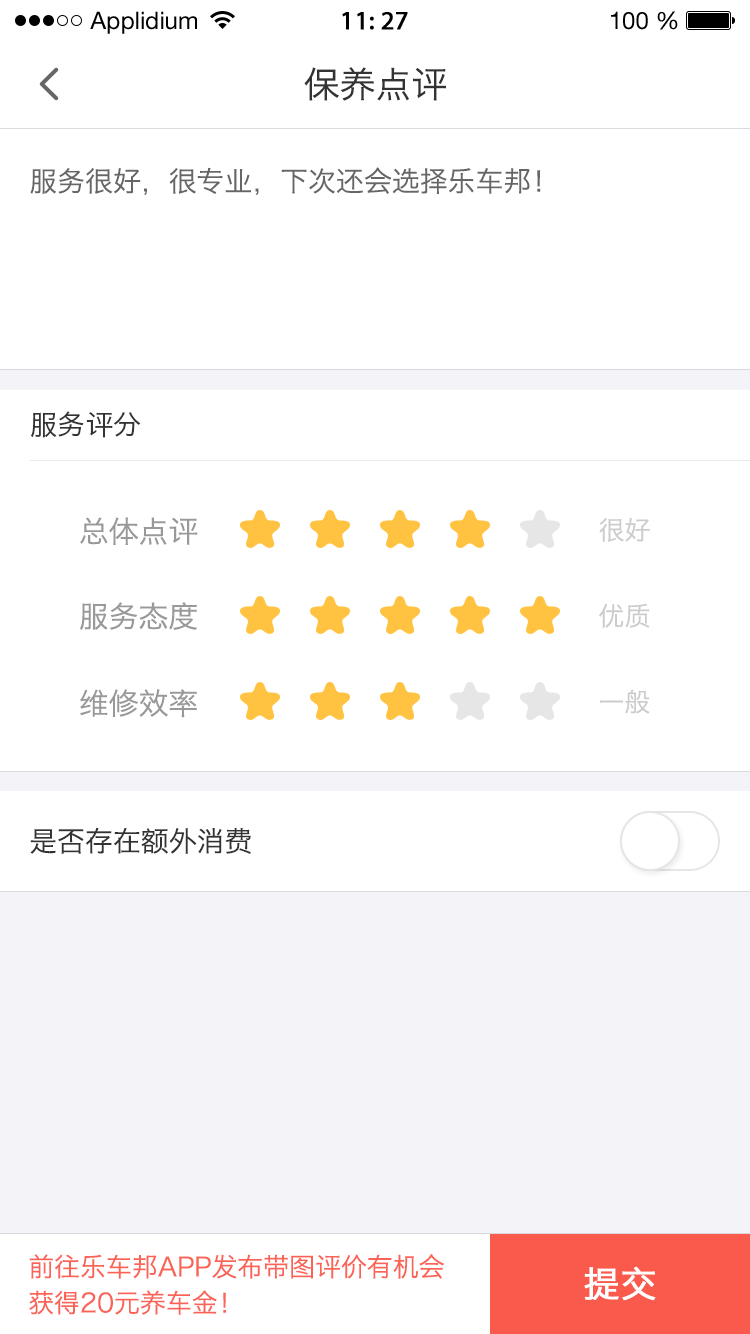
<style>
.page{position:relative;width:750px;height:1334px;background:#ffffff}
.page>*{position:absolute;margin:0}
.t1{font:24px "HelveticaNeueLTStd-Roman";color:#000000}
.t2{font:26px "MyriadPro-Regular";color:#000000;font-weight:bold}
.t3{font:36px "HiraginoSansGB-W3";color:#333333}
.t4{font:28px "HiraginoSansGB-W3";color:#666666}
.t5{font:28px "HiraginoSansGB-W3";color:#333333}
.t6{font:30px "HiraginoSansGB-W3";color:#999999}
.t7{font:26px "HiraginoSansGB-W3";color:#cccccc}
.t8{font:26px/36px "HiraginoSansGB-W3";color:#fa5a4b}
.t9{font:36px "HiraginoSansGB-W3";color:#ffffff;font-weight:bold}
</style>
<div class="page">
<p class="t1" style="left:90px;top:11px;width:107px;height:23px">Applidium</p>
<p class="t2" style="left:342px;top:12px;width:66px;height:18px">11: 27</p>
<p class="t1" style="left:611px;top:11px;width:67px;height:19px">100 %</p>
<p class="t3" style="left:304px;top:67px;width:142px;height:34px">保养点评</p>
<p class="t4" style="left:30px;top:167px;width:511px;height:28px">服务很好，很专业，下次还会选择乐车邦！</p>
<p class="t5" style="left:31px;top:411px;width:110px;height:27px">服务评分</p>
<p class="t6" style="left:80px;top:517px;width:118px;height:28px">总体点评</p>
<p class="t7" style="left:599px;top:517px;width:51px;height:25px">很好</p>
<p class="t6" style="left:80px;top:602px;width:117px;height:28px">服务态度</p>
<p class="t7" style="left:599px;top:603px;width:51px;height:25px">优质</p>
<p class="t6" style="left:80px;top:689px;width:117px;height:29px">维修效率</p>
<p class="t7" style="left:600px;top:689px;width:50px;height:25px">一般</p>
<p class="t5" style="left:30px;top:827px;width:221px;height:27px">是否存在额外消费</p>
<p class="t8" style="left:29px;top:1254px;width:415px;height:61px">前往乐车邦APP发布带图评价有机会<br>获得20元养车金！</p>
<p class="t9" style="left:584px;top:1266px;width:72px;height:35px">提交</p>
</div>
